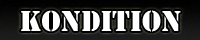
<style>
.page{position:relative;width:200px;height:40px}
.page>*{position:absolute;margin:0}
.t1{font:30px "Stencil";color:#ffffff}
</style>
<div class="page">
<p class="t1" style="left:21px;top:10px;width:160px;height:22px">Kondition</p>
</div>
